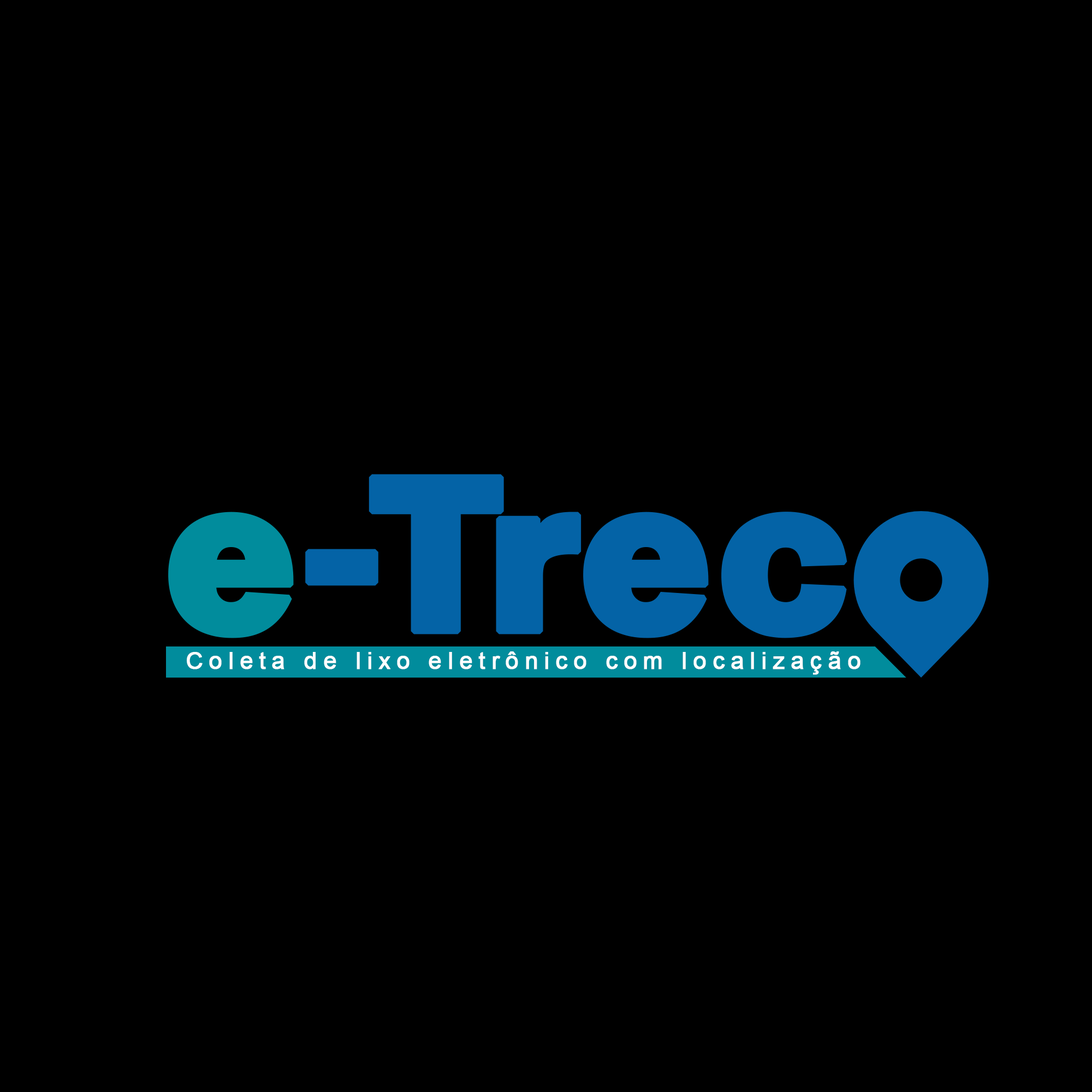
<style>
.page{position:relative;width:1092px;height:1092px;background:#000000}
.page>*{position:absolute;margin:0}
.t1{font:23.5px "ArialMT";letter-spacing:0.24em;color:#ffffff;font-weight:bold}
</style>
<div class="page">
<p class="t1" style="left:187px;top:651px;width:673px;height:24px">Coleta de lixo eletrônico com localização</p>
</div>
